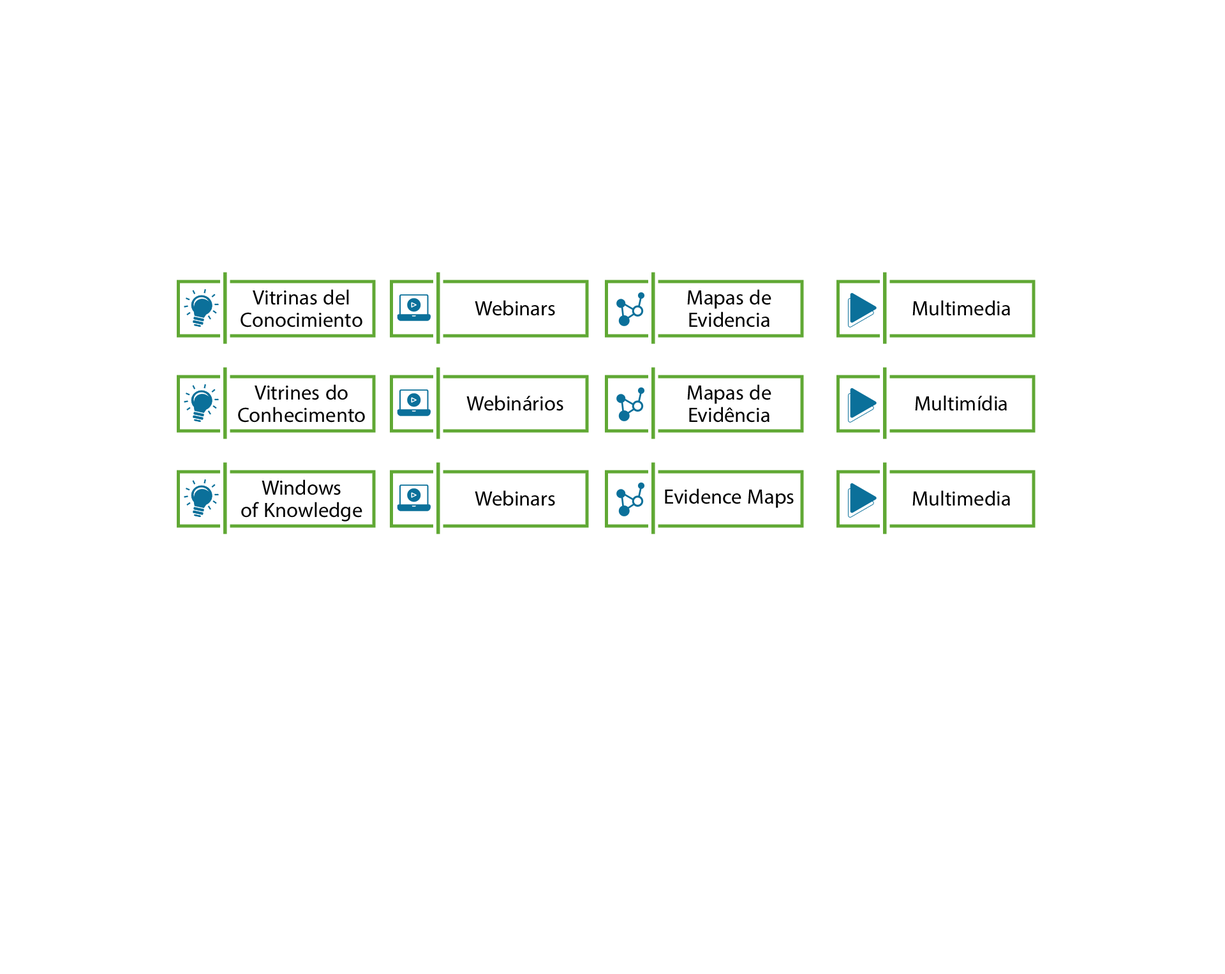
<style>
.page{position:relative;width:1225px;height:974px;background:#ffffff}
.page>*{position:absolute;margin:0}
.t1{font:29.1px/22.3px "MyriadArabic-Regular";color:#000000}
.t2{font:29.1px "MyriadArabic-Regular";color:#000000}
</style>
<div class="page">
<p class="t1" style="left:241px;top:289px;width:121px;height:38px;text-align:center">Vitrinas del<br>Conocimiento</p>
<p class="t1" style="left:687px;top:289px;width:84px;height:38px;text-align:center">Mapas de<br>Evidencia</p>
<p class="t2" style="left:475px;top:300px;width:80px;height:16px">Webinars</p>
<p class="t2" style="left:912px;top:300px;width:98px;height:16px">Multimedia</p>
<p class="t1" style="left:238px;top:384px;width:127px;height:38px;text-align:center">Vitrines do<br>Conhecimento</p>
<p class="t1" style="left:687px;top:384px;width:84px;height:38px;text-align:center">Mapas de<br>Evidência</p>
<p class="t2" style="left:466px;top:395px;width:97px;height:16px">Webinários</p>
<p class="t2" style="left:915px;top:395px;width:92px;height:16px">Multimídia</p>
<p class="t1" style="left:241px;top:479px;width:121px;height:42px;text-align:center">Windows<br>of Knowledge</p>
<p class="t2" style="left:475px;top:490px;width:80px;height:16px">Webinars</p>
<p class="t2" style="left:665px;top:488px;width:129px;height:20px">Evidence Maps</p>
<p class="t2" style="left:912px;top:490px;width:98px;height:16px">Multimedia</p>
</div>
